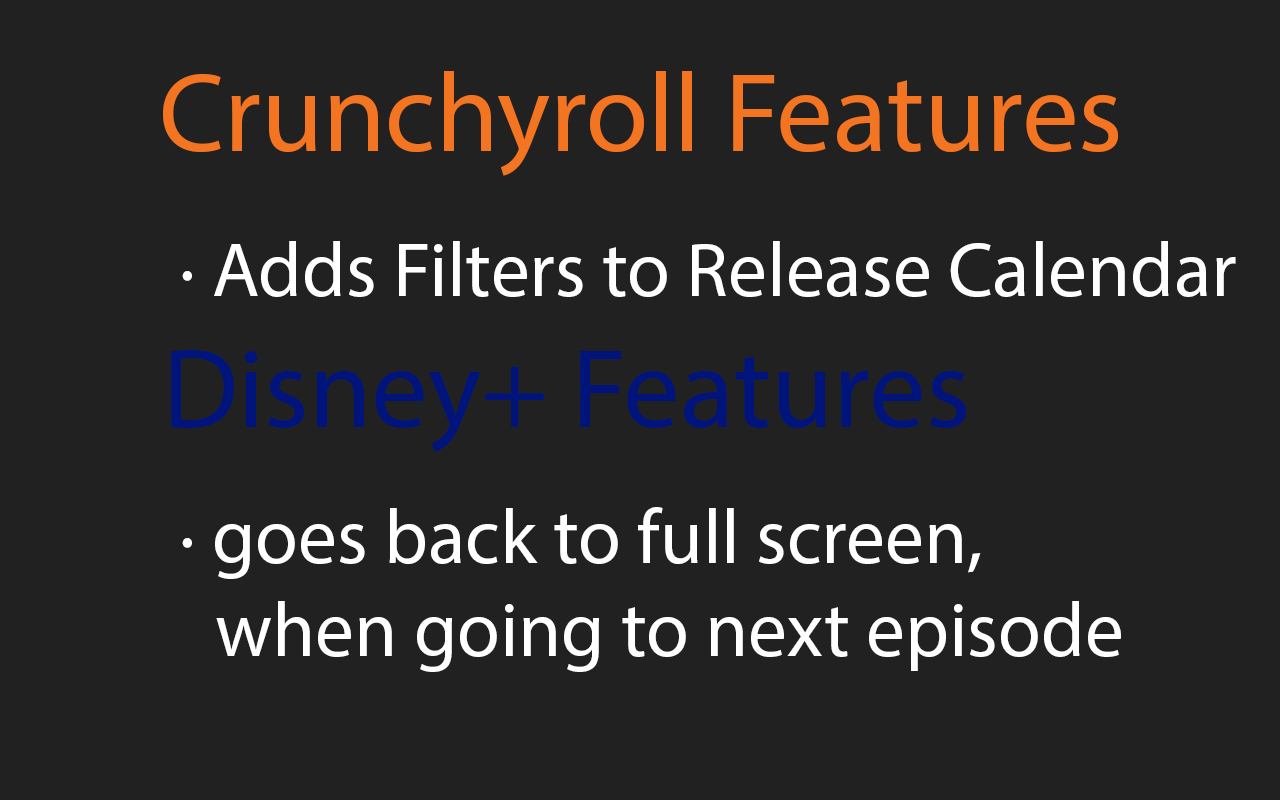
<style>
.page{position:relative;width:1280px;height:800px;background:#212121}
.page>*{position:absolute;margin:0}
.t1{font:112.7px "MyriadPro-Regular";color:#f47521}
.t2{font:77.6px "MyriadPro-Regular";color:#ffffff}
.t3{font:112.7px "MyriadPro-Regular";color:#01147c}
</style>
<div class="page">
<p class="t1" style="left:163px;top:71px;width:955px;height:105px">Crunchyroll Features</p>
<p class="t2" style="left:182px;top:241px;width:1054px;height:56px">· Adds Filters to Release Calendar</p>
<p class="t3" style="left:171px;top:350px;width:795px;height:102px">Disney+ Features</p>
<p class="t2" style="left:182px;top:507px;width:939px;height:165px">· goes back to full screen, <br>  when going to next episode</p>
</div>
